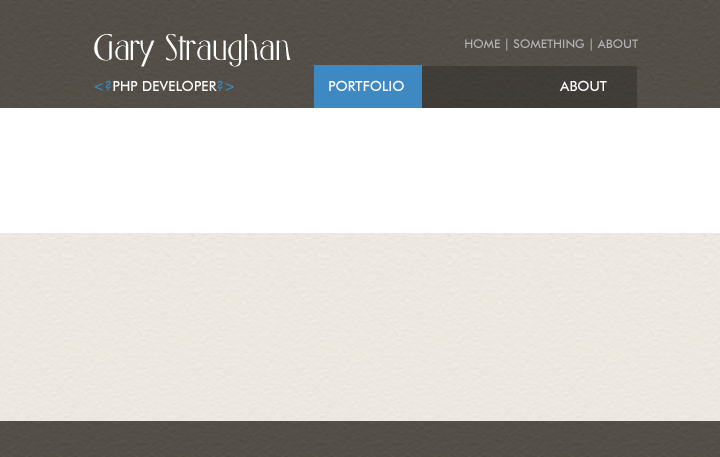
<style>
.page{position:relative;width:720px;height:457px;background:#ffffff}
.page>*{position:absolute;margin:0}
.t1{font:35.9px "FirenzeSF";color:#ffffff}
.t2{font:12px "FuturaBT-Medium";color:#b2b2b2}
.t3{font:13.9px "FuturaBT-Medium";color:#ffffff}
.t4{font:13.9px "FuturaBT-Medium";color:#3f89c3}
</style>
<div class="page">
<p class="t1" style="left:94px;top:34px;width:197px;height:33px">Gary Straughan</p>
<p class="t2" style="left:465px;top:38px;width:173px;height:13px">HOME | SOMETHING | ABOUT</p>
<p class="t3" style="left:94px;top:80px;width:140px;height:11px"><span class="t4">&lt;?</span>PHP DEVELOPER<span class="t4">?&gt;</span></p>
<p class="t3" style="left:329px;top:80px;width:75px;height:11px">PORTFOLIO</p>
<p class="t3" style="left:329px;top:80px;width:75px;height:11px">PORTFOLIO</p>
<p class="t3" style="left:559px;top:80px;width:48px;height:11px">ABOUT</p>
</div>
